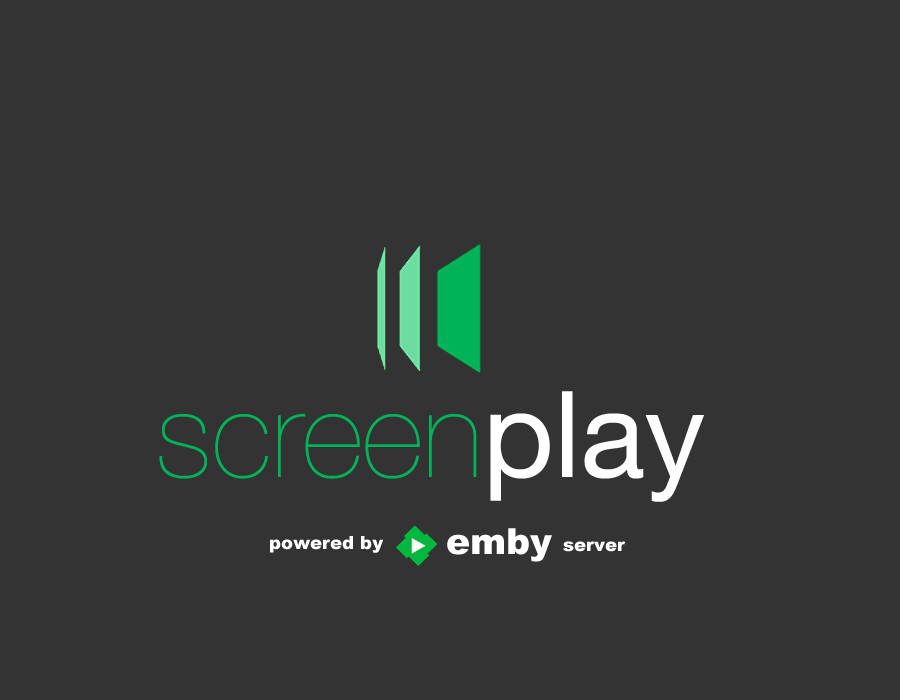
<style>
.page{position:relative;width:900px;height:700px;background:#333333}
.page>*{position:absolute;margin:0}
.t1{font:120px "HelveticaNeueLTCom-UltLt";color:#00b359}
.t2{font:120px "HelveticaNeue";color:#ffffff}
.t3{font:36px "Arial-Black";color:#ffffff}
.t4{font:18px "Arial-Black";color:#ffffff}
</style>
<div class="page">
<p class="t1" style="left:159px;top:391px;width:545px;height:111px">screen<span class="t2">play</span></p>
<p class="t3" style="left:447px;top:528px;width:105px;height:34px">emby</p>
<p class="t4" style="left:270px;top:536px;width:114px;height:17px">powered by</p>
<p class="t4" style="left:563px;top:541px;width:63px;height:11px">server</p>
</div>
